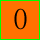
<style>
.page{position:relative;width:40px;height:40px;background:#ff7200}
.page>*{position:absolute;margin:0}
.t1{font:30px "SimSun";color:#000000}
</style>
<div class="page">
<p class="t1" style="left:14px;top:8px;width:13px;height:22px">0</p>
</div>
